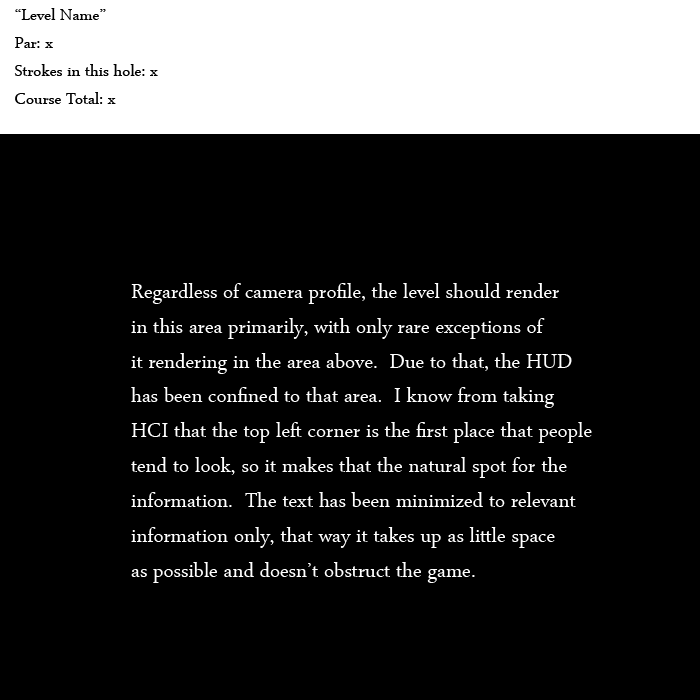
<style>
.page{position:relative;width:700px;height:700px;background:#000000}
.page>*{position:absolute;margin:0}
.t1{font:23.3px "ArabicTypesetting";color:#000000}
.t2{font:29px "ArabicTypesetting";color:#ffffff}
</style>
<div class="page">
<p class="t1" style="left:14px;top:8px;width:144px;height:96px">“Level Name”<br>Par: x<br>Strokes in this hole: x<br>Course Total: x</p>
<p class="t2" style="left:131px;top:283px;width:461px;height:300px">Regardless of camera profile, the level should render<br>in this area primarily, with only rare exceptions of<br>it rendering in the area above.  Due to that, the HUD<br>has been confined to that area.  I know from taking<br>HCI that the top left corner is the first place that people<br>tend to look, so it makes that the natural spot for the <br>information.  The text has been minimized to relevant<br>information only, that way it takes up as little space<br>as possible and doesn’t obstruct the game.</p>
</div>
